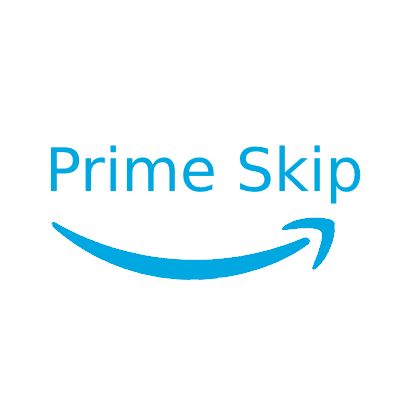
<style>
.page{position:relative;width:400px;height:400px;background:#ffffff}
.page>*{position:absolute;margin:0}
.t1{font:60px "DejaVuSans";color:#00a8e1}
</style>
<div class="page">
<p class="t1" style="left:50px;top:145px;width:311px;height:59px">Prime Skip</p>
</div>
